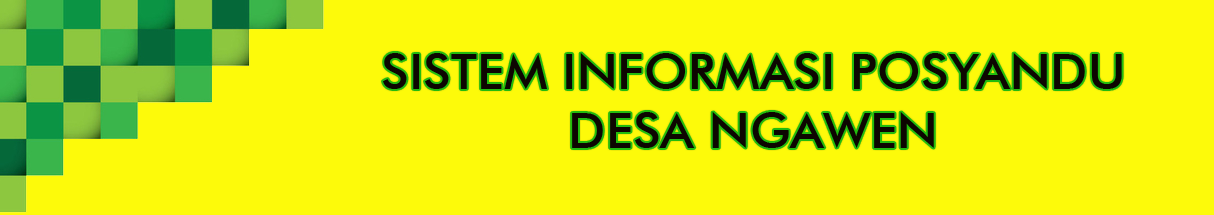
<style>
.page{position:relative;width:1214px;height:215px;background:#fdfa0a}
.page>*{position:absolute;margin:0}
.t1{font:49.1px "FuturaBT-Medium";color:#0d0601}
</style>
<div class="page">
<p class="t1" style="left:383px;top:53px;width:739px;height:95px;text-align:center">SISTEM INFORMASI POSYANDU<br>DESA NGAWEN</p>
</div>
